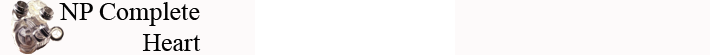
<style>
.page{position:relative;width:710px;height:55px;background:#fdfafa}
.page>*{position:absolute;margin:0}
.t1{font:26px "TimesNewRomanPSMT";color:#030303}
</style>
<div class="page">
<p class="t1" style="left:59px;top:2px;width:142px;height:49px;text-align:right">NP Complete<br>Heart</p>
</div>
